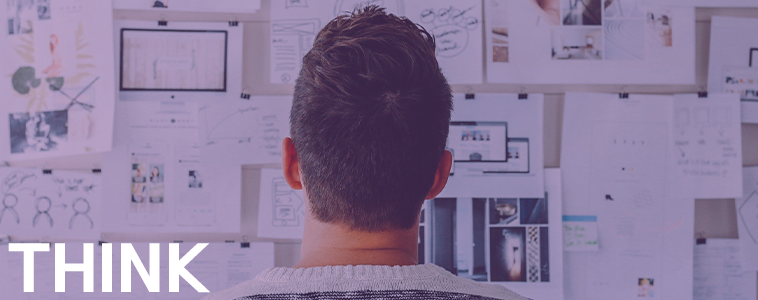
<style>
.page{position:relative;width:758px;height:300px}
.page>*{position:absolute;margin:0}
.t1{font:66px "TTDarakbangR";color:#ffffff;scale:1.09 1}
</style>
<div class="page">
<p class="t1" style="left:8px;top:243px;width:203px;height:50px">THINK</p>
</div>
